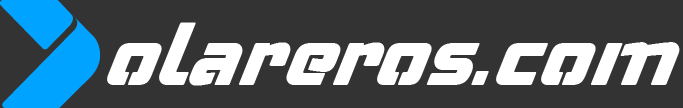
<style>
.page{position:relative;width:683px;height:108px;background:#333333}
.page>*{position:absolute;margin:0}
.t1{font:80.7px "PervitinaDex";color:#ffffff}
</style>
<div class="page">
<p class="t1" style="left:107px;top:22px;width:573px;height:64px">olareros.com</p>
</div>
